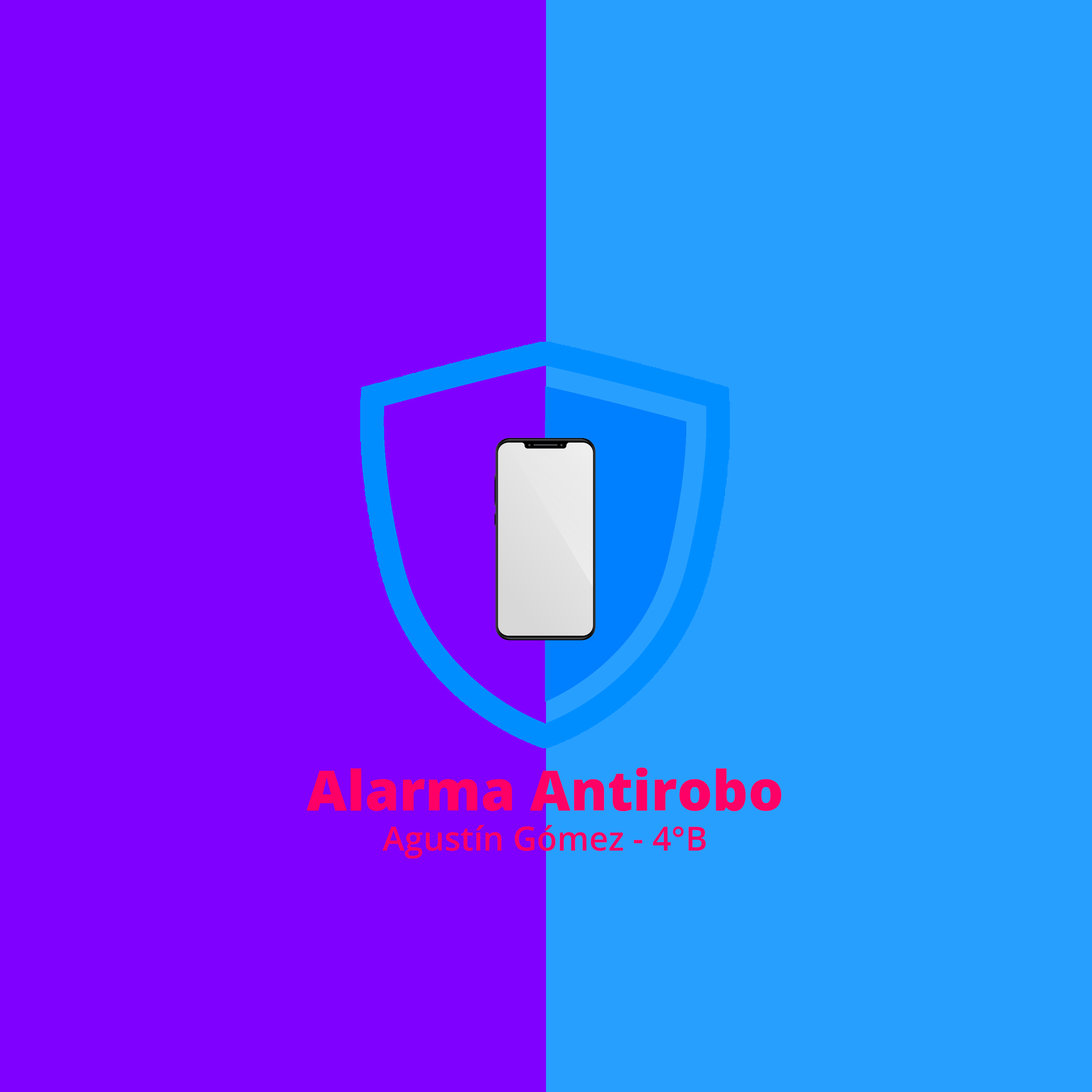
<style>
.page{position:relative;width:1092px;height:1092px;background:#8000ff}
.page>*{position:absolute;margin:0}
.t1{font:33.4px "OpenSans-SemiBold";color:#ff0066}
.t2{font:55.6px "OpenSans-ExtraBold";color:#ff0066}
</style>
<div class="page">
<p class="t1" style="left:307px;top:767px;width:474px;height:92px;text-align:center"><span class="t2">Alarma Antirobo<br></span>Agustín Gómez - 4°B</p>
</div>
